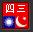
<style>
.page{position:relative;width:33px;height:32px;background:#333333}
.page>*{position:absolute;margin:0}
.t1{font:10.4px "SimSun";color:#ffffff}
</style>
<div class="page">
<p class="t1" style="left:6px;top:4px;width:19px;height:9px">四三</p>
</div>
